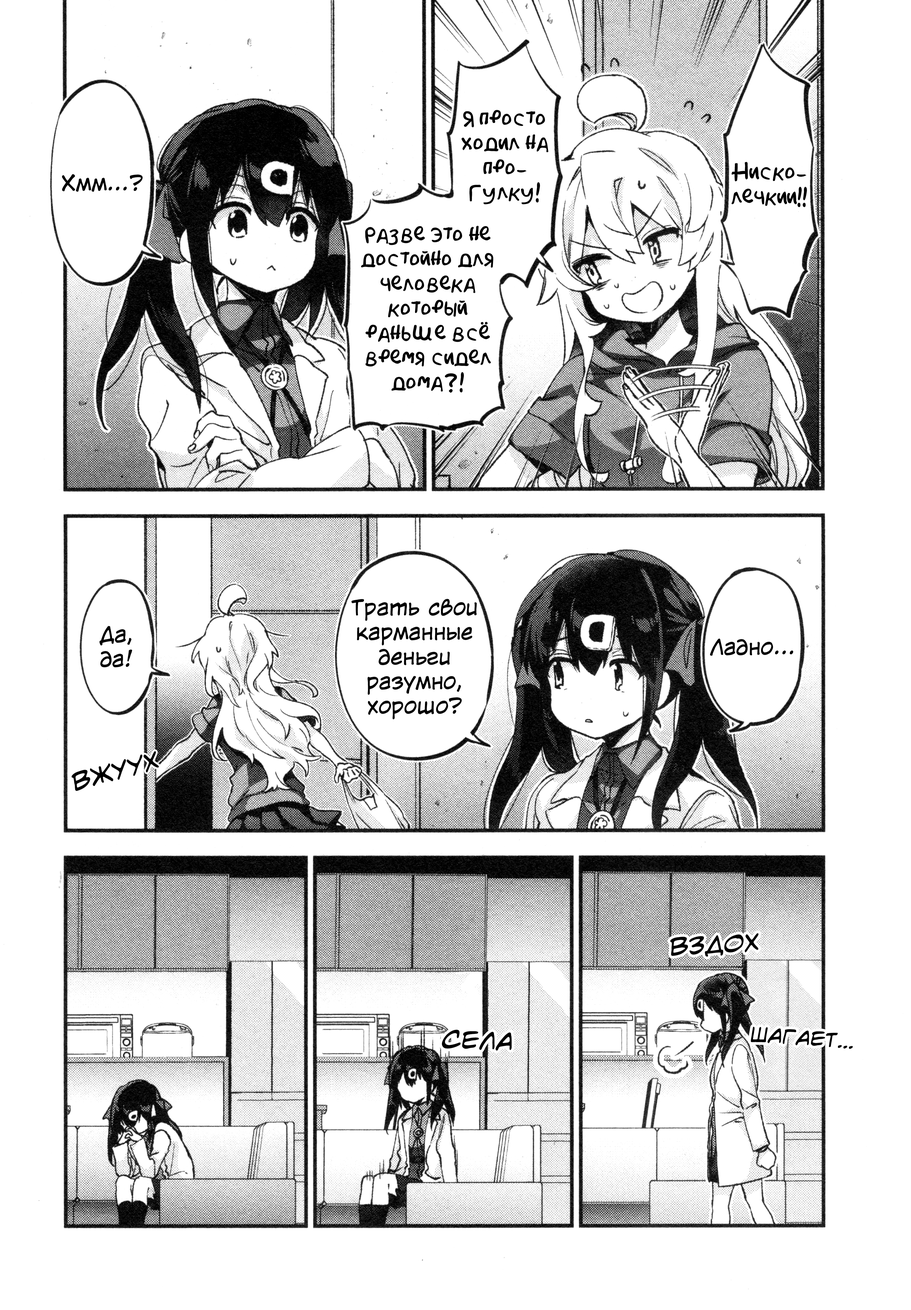
<style>
.page{position:relative;width:911px;height:1310px;background:#ffffff}
.page>*{position:absolute;margin:0}
.t1{font:20.5px "AkbarPlain";letter-spacing:0.006em;color:#000000}
.t2{font:20.5px "v_CCWildWordsLower";letter-spacing:0.006em;color:#000000}
.t3{font:30.7px "v_HometownHeroBB";letter-spacing:0.006em;color:#000000;text-transform:uppercase}
.t4{font:25.6px "v_HometownHeroBB";letter-spacing:0.006em;color:#000000;text-transform:uppercase}
.t5{font:25.6px "v_HometownHeroBB";letter-spacing:0.006em;color:#000000}
</style>
<div class="page">
<p class="t1" style="left:461px;top:110px;width:87px;height:94px;text-align:center">Я просто ходил на про-<br>гулку!</p>
<p class="t1" style="left:731px;top:162px;width:76px;height:45px;text-align:center">Ниско-<br>лечкии!!</p>
<p class="t2" style="left:62px;top:174px;width:81px;height:18px">Хмм...?</p>
<p class="t1" style="left:361px;top:226px;width:132px;height:167px;text-align:center">Разве это не достойно для человека который раньше всё время сидел дома?!</p>
<p class="t2" style="left:351px;top:599px;width:126px;height:120px;text-align:center">Трать свои карманные деньги разумно, хорошо?</p>
<p class="t2" style="left:99px;top:626px;width:33px;height:41px;text-align:center">Да, да!</p>
<p class="t2" style="left:710px;top:638px;width:83px;height:18px">Ладно...</p>
<p class="t3" style="left:71px;top:751px;width:88px;height:40px;rotate:-15deg">вжуух</p>
<p class="t3" style="left:670px;top:933px;width:88px;height:23px;rotate:-3deg">Вздох</p>
<p class="t3" style="left:442px;top:1029px;width:70px;height:21px;rotate:2deg">Села</p>
<p class="t4" style="left:750px;top:1026px;width:102px;height:23px;rotate:4deg">Ша<span class="t5">г</span>ает...</p>
</div>
